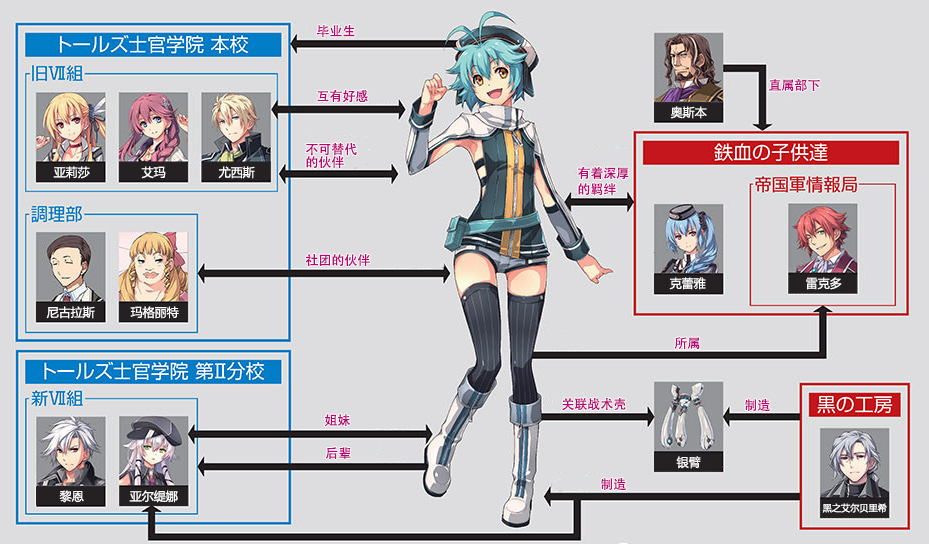
<style>
.page{position:relative;width:929px;height:544px;background:#dddddf}
.page>*{position:absolute;margin:0}
.t1{font:13px "AdobeHeitiStd-Regular";color:#b70773}
.t2{font:12px "MicrosoftYaHei";color:#ffffff}
.t3{font:13px/13px "AdobeHeitiStd-Regular";color:#b70773}
.t4{font:13px/16px "AdobeHeitiStd-Regular";color:#b70773}
.t5{font:9.2px "MicrosoftYaHei";color:#ffffff}
</style>
<div class="page">
<p class="t1" style="left:316px;top:25px;width:39px;height:13px">毕业生</p>
<p class="t1" style="left:317px;top:89px;width:51px;height:14px">互有好感</p>
<p class="t1" style="left:769px;top:79px;width:51px;height:13px">直属部下</p>
<p class="t2" style="left:670px;top:106px;width:37px;height:13px">奥斯本</p>
<p class="t3" style="left:306px;top:143px;width:51px;height:26px">不可替代<br>的伙伴</p>
<p class="t2" style="left:53px;top:166px;width:37px;height:13px">亚莉莎</p>
<p class="t2" style="left:141px;top:166px;width:25px;height:13px">艾玛</p>
<p class="t2" style="left:218px;top:166px;width:37px;height:13px">尤西斯</p>
<p class="t4" style="left:578px;top:166px;width:51px;height:30px">有着深厚<br>的羁绊</p>
<p class="t1" style="left:305px;top:254px;width:65px;height:13px">社团的伙伴</p>
<p class="t2" style="left:669px;top:277px;width:37px;height:13px">克蕾雅</p>
<p class="t2" style="left:806px;top:277px;width:36px;height:13px">雷克多</p>
<p class="t2" style="left:46px;top:306px;width:49px;height:13px">尼古拉斯</p>
<p class="t2" style="left:130px;top:306px;width:49px;height:13px">玛格丽特</p>
<p class="t1" style="left:674px;top:337px;width:26px;height:13px">所属</p>
<p class="t1" style="left:562px;top:398px;width:64px;height:13px">关联战术壳</p>
<p class="t1" style="left:745px;top:399px;width:25px;height:12px">制造</p>
<p class="t1" style="left:324px;top:414px;width:26px;height:13px">姐妹</p>
<p class="t1" style="left:325px;top:447px;width:26px;height:13px">后辈</p>
<p class="t2" style="left:676px;top:456px;width:25px;height:13px">银臂</p>
<p class="t1" style="left:601px;top:478px;width:25px;height:12px">制造</p>
<p class="t2" style="left:59px;top:490px;width:25px;height:13px">黎恩</p>
<p class="t2" style="left:129px;top:490px;width:49px;height:13px">亚尔缇娜</p>
<p class="t5" style="left:822px;top:503px;width:65px;height:10px">黑之艾尔贝里希</p>
</div>
